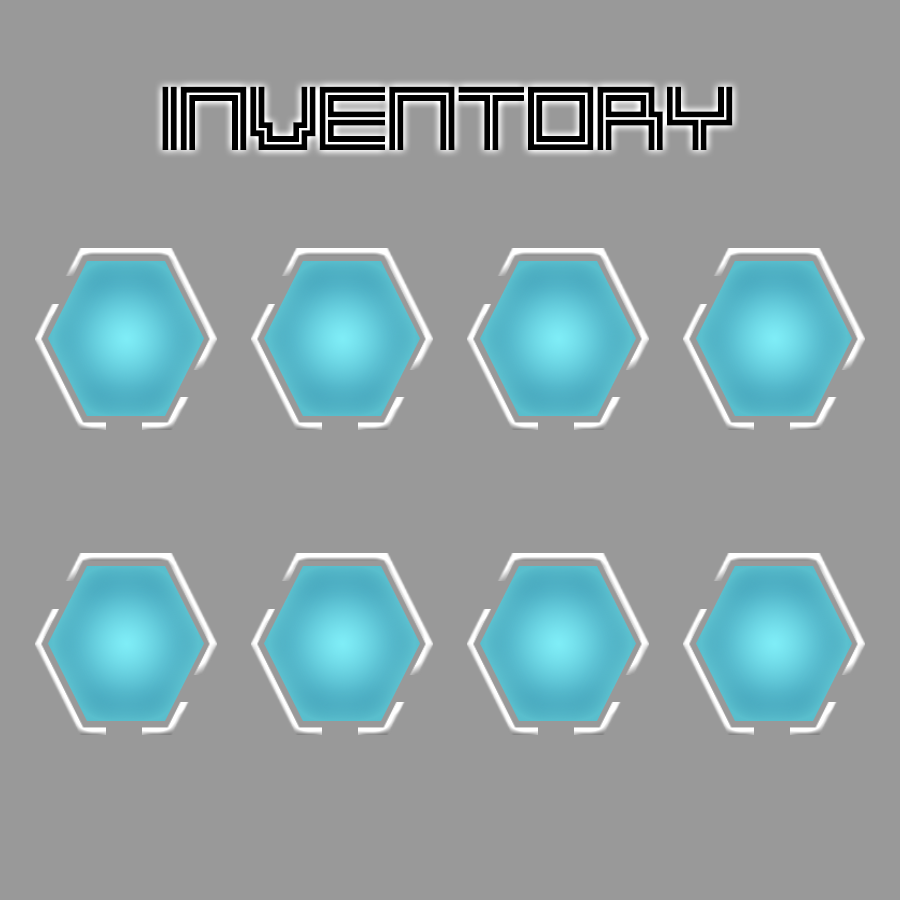
<style>
.page{position:relative;width:900px;height:900px;background:#999999}
.page>*{position:absolute;margin:0}
.t1{font:90px "2Lines";color:#000000}
</style>
<div class="page">
<p class="t1" style="left:162px;top:86px;width:571px;height:64px">Inventory</p>
</div>
